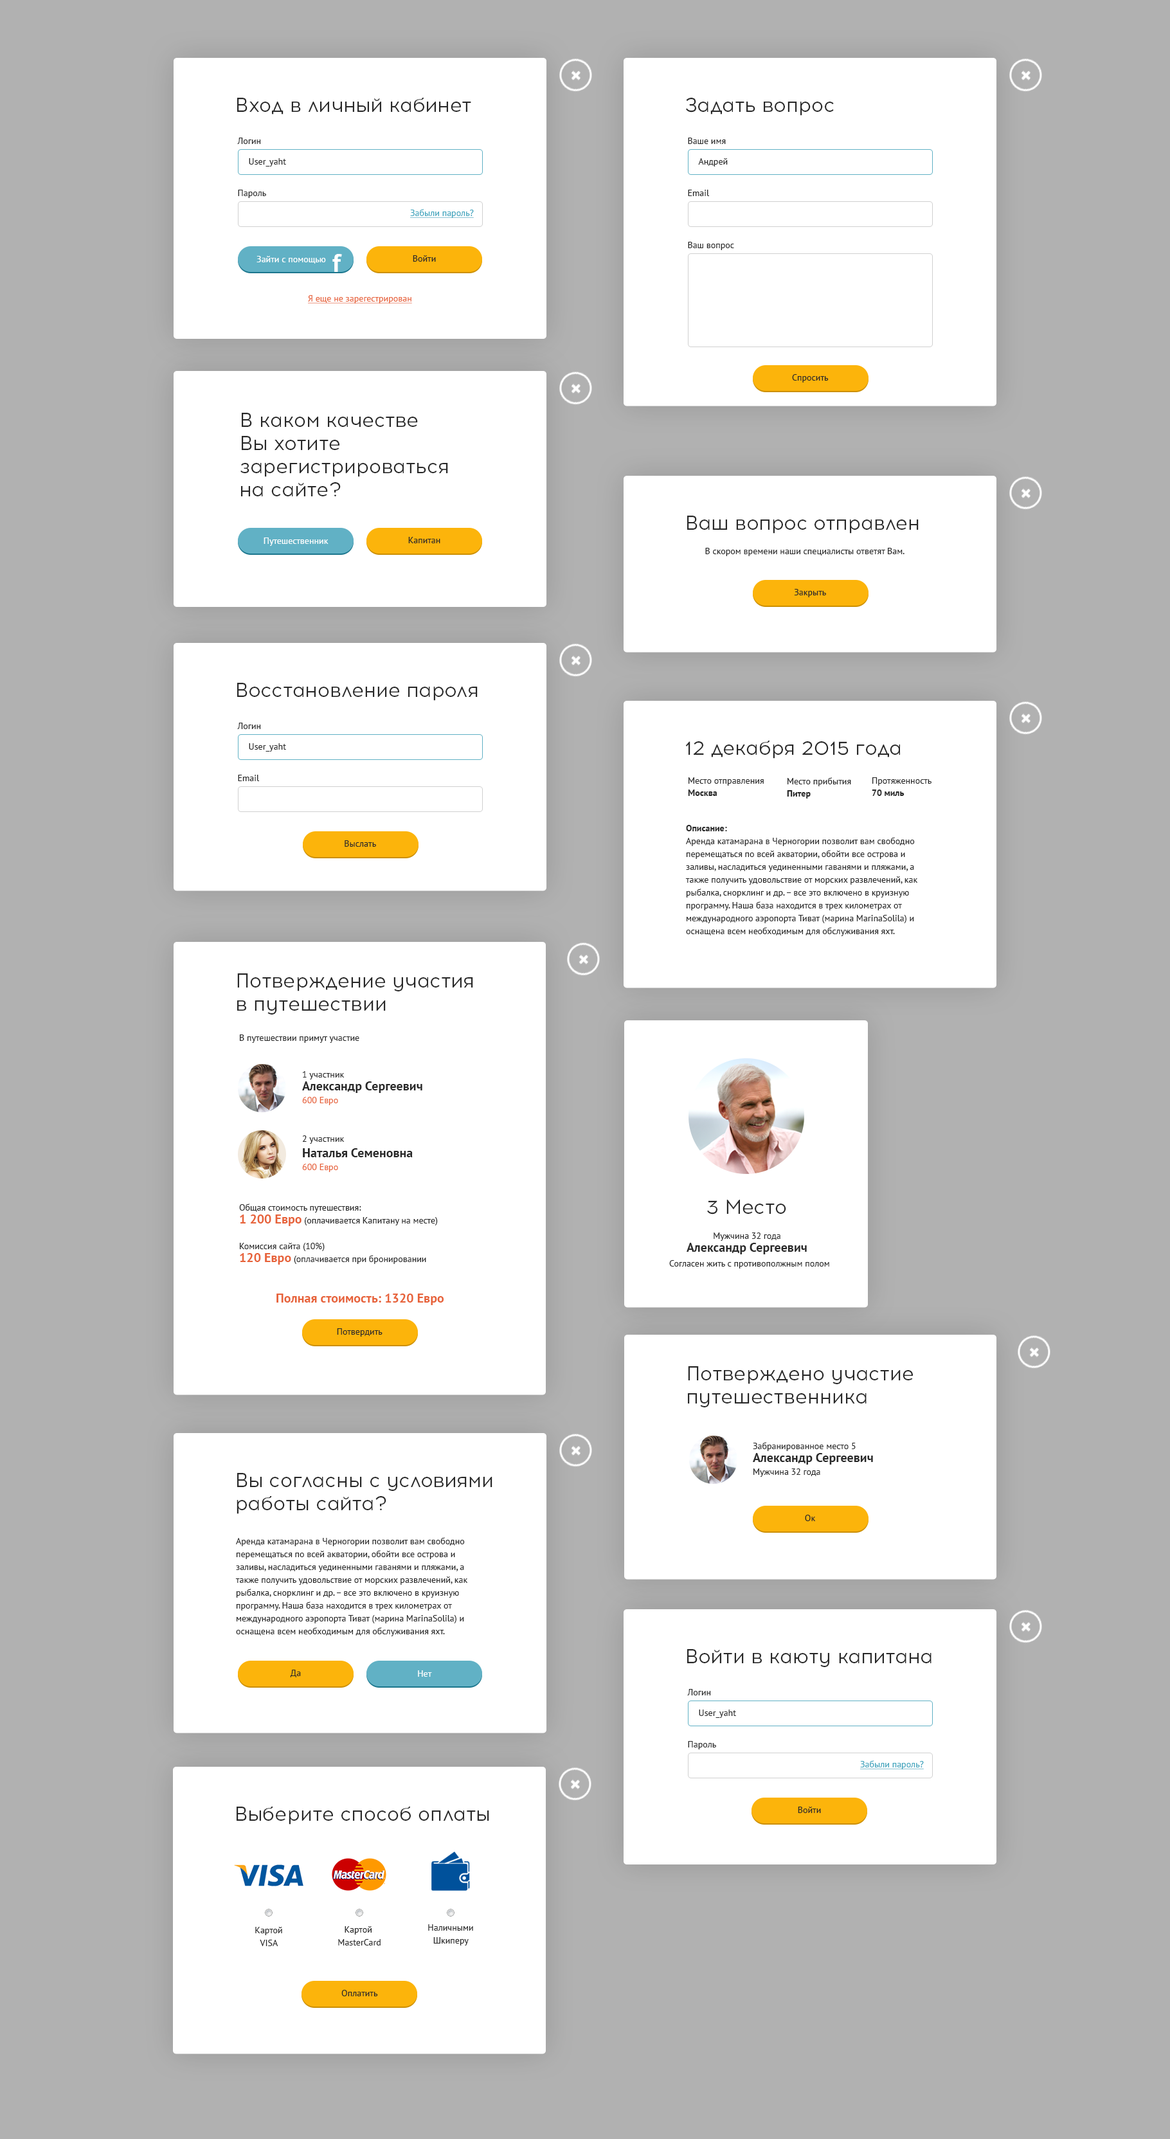
<style>
.page{position:relative;width:1170px;height:2139px;background:#ffffff}
.page>*{position:absolute;margin:0}
.t1{font:19.3px "Acrom-Regular";color:#282828}
.t2{font:9px "PTSans-Regular";color:#282828}
.t3{font:9px "PTSans-Regular";color:#3fa5be;text-decoration:underline}
.t4{font:9px "PTSans-Regular";color:#ffffff}
.t5{font:25.7px "PTSans-Bold";color:#ffffff}
.t6{font:9px "PTSans-Regular";color:#e76239;text-decoration:underline}
.t7{font:9px/12.2px "PTSans-Regular";color:#282828}
.t8{font:9px/12.2px "PTSans-Bold";color:#282828}
.t9{font:9px/12.9px "PTSans-Regular";color:#282828}
.t10{font:9px "PTSans-Bold";color:#282828}
.t11{font:12.9px/12.9px "PTSans-Bold";color:#282828}
.t12{font:9px/12.9px "PTSans-Regular";color:#e76239}
.t13{font:12.9px "PTSans-Bold";color:#282828}
.t14{font:12.9px/12.9px "PTSans-Bold";color:#e76239}
.t15{font:12.9px "PTSans-Bold";color:#e76239}
</style>
<div class="page">
<p class="t1" style="left:237px;top:98px;width:234px;height:16px">Вход в личный кабинет</p>
<p class="t1" style="left:686px;top:98px;width:148px;height:18px">Задать вопрос</p>
<p class="t2" style="left:237px;top:138px;width:24px;height:6px">Логин</p>
<p class="t2" style="left:688px;top:138px;width:38px;height:6px">Ваше имя</p>
<p class="t2" style="left:249px;top:158px;width:37px;height:8px">User_yaht</p>
<p class="t2" style="left:698px;top:158px;width:30px;height:8px">Андрей</p>
<p class="t2" style="left:238px;top:190px;width:28px;height:8px">Пароль</p>
<p class="t2" style="left:688px;top:190px;width:22px;height:6px">Email</p>
<p class="t3" style="left:410px;top:209px;width:64px;height:9px">Забыли пароль?</p>
<p class="t2" style="left:688px;top:242px;width:46px;height:8px">Ваш вопрос</p>
<p class="t4" style="left:256px;top:256px;width:70px;height:8px">Зайти с помощью</p>
<p class="t5" style="left:332px;top:254px;width:10px;height:18px">f</p>
<p class="t2" style="left:413px;top:255px;width:23px;height:7px">Войти</p>
<p class="t6" style="left:308px;top:295px;width:104px;height:8px">Я еще не зарегестрирован</p>
<p class="t2" style="left:792px;top:374px;width:37px;height:8px">Спросить</p>
<p class="t1" style="left:240px;top:413px;width:208px;height:83px">В каком качестве <br>Вы хотите <br>зарегистрироваться <br>на сайте?</p>
<p class="t1" style="left:687px;top:516px;width:232px;height:18px">Ваш вопрос отправлен</p>
<p class="t4" style="left:264px;top:537px;width:64px;height:9px">Путешественник</p>
<p class="t2" style="left:408px;top:537px;width:32px;height:6px">Капитан</p>
<p class="t2" style="left:705px;top:548px;width:200px;height:8px">В скором времени наши специалисты ответят Вам.</p>
<p class="t2" style="left:794px;top:589px;width:32px;height:8px">Закрыть</p>
<p class="t1" style="left:237px;top:683px;width:241px;height:18px">Восстановление пароля</p>
<p class="t2" style="left:237px;top:723px;width:24px;height:6px">Логин</p>
<p class="t2" style="left:249px;top:743px;width:37px;height:9px">User_yaht</p>
<p class="t1" style="left:685px;top:741px;width:215px;height:18px">12 декабря 2015 года</p>
<p class="t2" style="left:238px;top:775px;width:22px;height:6px">Email</p>
<p class="t7" style="left:688px;top:777px;width:76px;height:19px">Место отправления<br><span class="t8">Москва</span></p>
<p class="t7" style="left:787px;top:777px;width:64px;height:21px">Место прибытия<br><span class="t8">Питер</span></p>
<p class="t7" style="left:872px;top:777px;width:60px;height:19px">Протяженность<br><span class="t8">70 миль</span></p>
<p class="t9" style="left:685px;top:825px;width:233px;height:111px"><span class="t10">Описание:<br></span>Аренда катамарана в Черногории позволит вам свободно перемещаться по всей акватории, обойти все острова и заливы, насладиться уединенными гаванями и пляжами, а также получить удовольствие от морских развлечений, как рыбалка, снорклинг и др. – все это включено в круизную программу. Наша база находится в трех километрах от международного аэропорта Тиват (марина MarinaSolila) и оснащена всем необходимым для обслуживания яхт.</p>
<p class="t2" style="left:345px;top:840px;width:31px;height:7px">Выслать</p>
<p class="t1" style="left:237px;top:973px;width:236px;height:41px">Потверждение участия<br>в путешествии</p>
<p class="t2" style="left:240px;top:1034px;width:119px;height:9px">В путешествии примут участие</p>
<p class="t11" style="left:302px;top:1071px;width:120px;height:34px"><span class="t9">1 участник<br></span>Александр Сергеевич<br><span class="t12">600 Евро</span></p>
<p class="t13" style="left:302px;top:1135px;width:111px;height:37px"><span class="t9">2 участник<br></span>Наталья Семеновна<br><span class="t12">600 Евро</span></p>
<p class="t9" style="left:239px;top:1203px;width:199px;height:61px">Общая стоимость путешествия: <br><span class="t14">1 200 Евро </span>(оплачивается Капитану на месте)<br><br>Комиссия сайта (10%)<br><span class="t14">120 Евро</span> (оплачивается при бронировании</p>
<p class="t1" style="left:707px;top:1200px;width:79px;height:14px">3 Место</p>
<p class="t11" style="left:687px;top:1232px;width:120px;height:22px;text-align:center"><span class="t9">Мужчина 32 года<br></span>Александр Сергеевич</p>
<p class="t2" style="left:669px;top:1260px;width:160px;height:8px">Согласен жить с противополжным полом</p>
<p class="t15" style="left:276px;top:1293px;width:168px;height:12px">Полная стоимость: 1320 Евро</p>
<p class="t2" style="left:337px;top:1328px;width:45px;height:8px">Потвердить</p>
<p class="t1" style="left:688px;top:1366px;width:225px;height:41px">Потверждено участие<br>путешественника</p>
<p class="t9" style="left:753px;top:1442px;width:120px;height:35px">Забранированное место 5<br><span class="t11">Александр Сергеевич<br></span>Мужчина 32 года</p>
<p class="t1" style="left:237px;top:1473px;width:255px;height:41px">Вы согласны с условиями<br>работы сайта?</p>
<p class="t2" style="left:805px;top:1515px;width:11px;height:6px">Ок</p>
<p class="t9" style="left:235px;top:1537px;width:233px;height:99px">Аренда катамарана в Черногории позволит вам свободно перемещаться по всей акватории, обойти все острова и заливы, насладиться уединенными гаванями и пляжами, а также получить удовольствие от морских развлечений, как рыбалка, снорклинг и др. – все это включено в круизную программу. Наша база находится в трех километрах от международного аэропорта Тиват (марина MarinaSolila) и оснащена всем необходимым для обслуживания яхт.</p>
<p class="t1" style="left:687px;top:1649px;width:245px;height:18px">Войти в каюту капитана</p>
<p class="t2" style="left:290px;top:1670px;width:11px;height:7px">Да</p>
<p class="t4" style="left:418px;top:1670px;width:14px;height:7px">Нет</p>
<p class="t2" style="left:687px;top:1689px;width:24px;height:6px">Логин</p>
<p class="t2" style="left:699px;top:1709px;width:37px;height:9px">User_yaht</p>
<p class="t2" style="left:688px;top:1741px;width:28px;height:8px">Пароль</p>
<p class="t3" style="left:860px;top:1760px;width:64px;height:9px">Забыли пароль?</p>
<p class="t1" style="left:237px;top:1806px;width:252px;height:18px">Выберите способ оплаты</p>
<p class="t2" style="left:798px;top:1806px;width:23px;height:7px">Войти</p>
<p class="t9" style="left:428px;top:1924px;width:45px;height:21px;text-align:center">Наличными<br>Шкиперу</p>
<p class="t9" style="left:255px;top:1927px;width:27px;height:19px;text-align:center">Картой<br>VISA</p>
<p class="t9" style="left:338px;top:1926px;width:43px;height:19px;text-align:center">Картой <br>MasterCard</p>
<p class="t2" style="left:341px;top:1990px;width:37px;height:6px">Оплатить</p>
</div>
